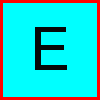
<style>
.page{position:relative;width:100px;height:100px;background:#00ffff}
.page>*{position:absolute;margin:0}
.t1{font:60px "MicrosoftSansSerif";color:#060808}
</style>
<div class="page">
<p class="t1" style="left:35px;top:27px;width:32px;height:43px">E</p>
</div>
